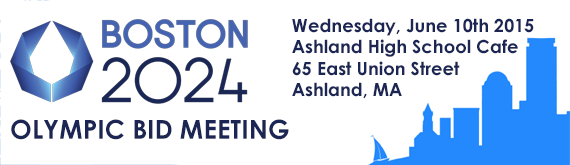
<style>
.page{position:relative;width:570px;height:165px;background:#ffffff}
.page>*{position:absolute;margin:0}
.t1{font:18px "CenturyGothic-Bold";color:#1c2655}
.t2{font:26px "CenturyGothic-Bold";color:#1c2655}
</style>
<div class="page">
<p class="t1" style="left:292px;top:18px;width:242px;height:81px">Wednesday, June 10th 2015<br>Ashland High School Cafe<br>65 East Union Street<br>Ashland, MA</p>
<p class="t2" style="left:11px;top:119px;width:278px;height:21px">OLYMPIC BID MEETING</p>
</div>
